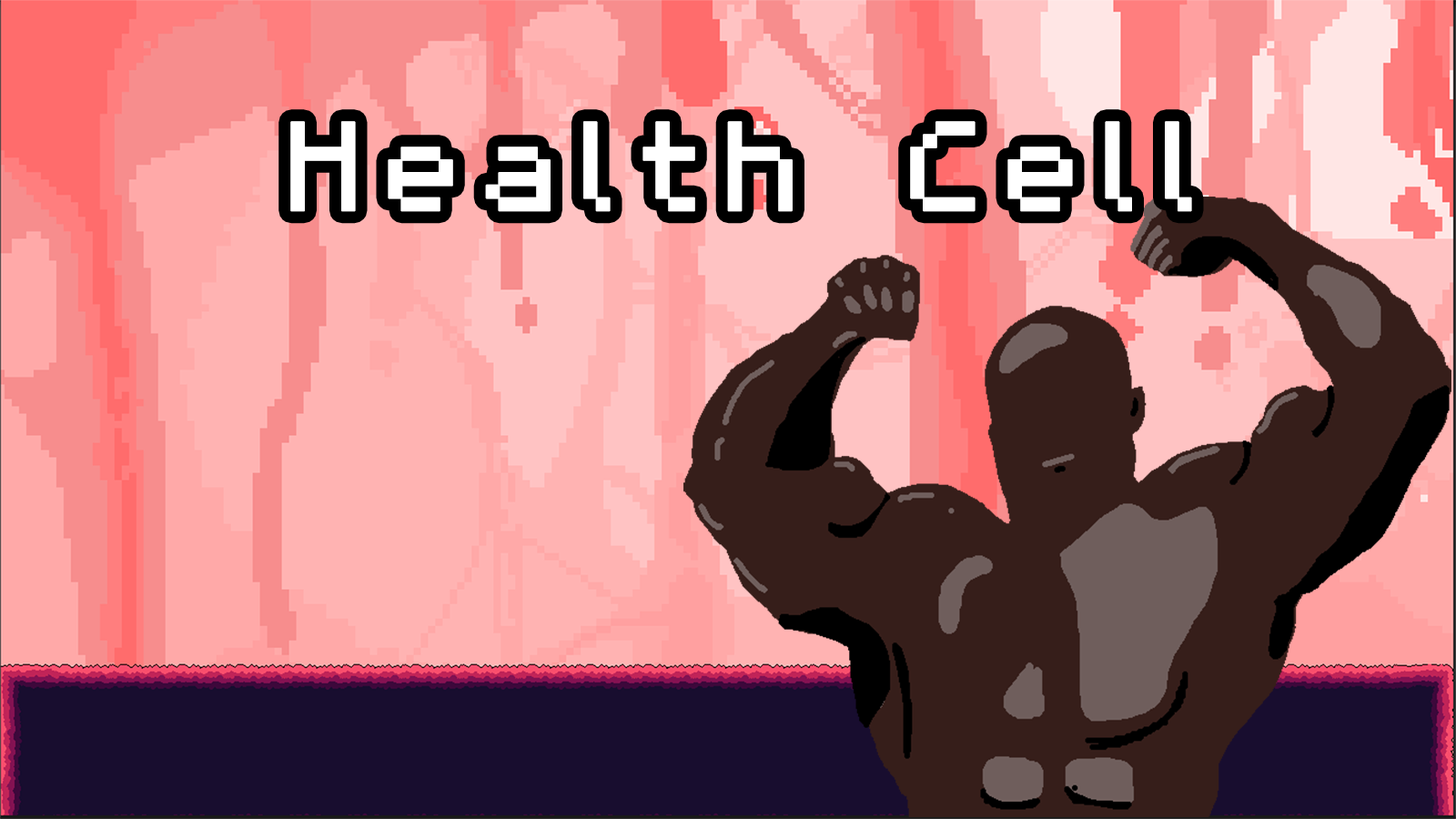
<style>
.page{position:relative;width:1456px;height:819px}
.page>*{position:absolute;margin:0}
.t1{font:202.2px "m5x7";letter-spacing:0.08em;color:#ffffff;font-weight:bold}
</style>
<div class="page">
<p class="t1" style="left:290px;top:121px;width:902px;height:91px">Health Cell</p>
</div>
